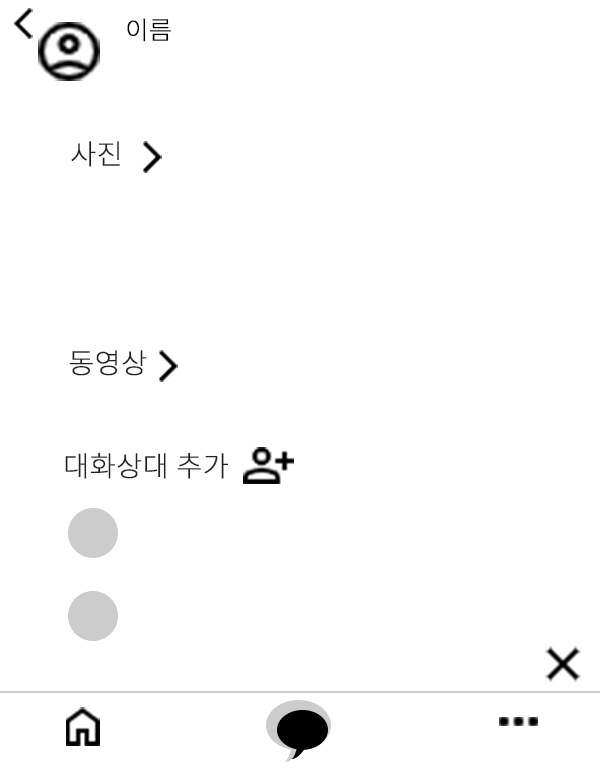
<style>
.page{position:relative;width:600px;height:768px;background:#ffffff}
.page>*{position:absolute;margin:0}
.t1{font:25px "NotoSansKR-Thin";color:#000000;font-weight:bold}
.t2{font:28px "NotoSansKR-Thin";color:#222222;font-weight:bold}
</style>
<div class="page">
<p class="t1" style="left:127px;top:18px;width:44px;height:24px">이름</p>
<p class="t2" style="left:71px;top:141px;width:49px;height:26px">사진</p>
<p class="t2" style="left:69px;top:350px;width:78px;height:26px">동영상</p>
<p class="t2" style="left:65px;top:452px;width:164px;height:27px">대화상대 추가</p>
</div>
